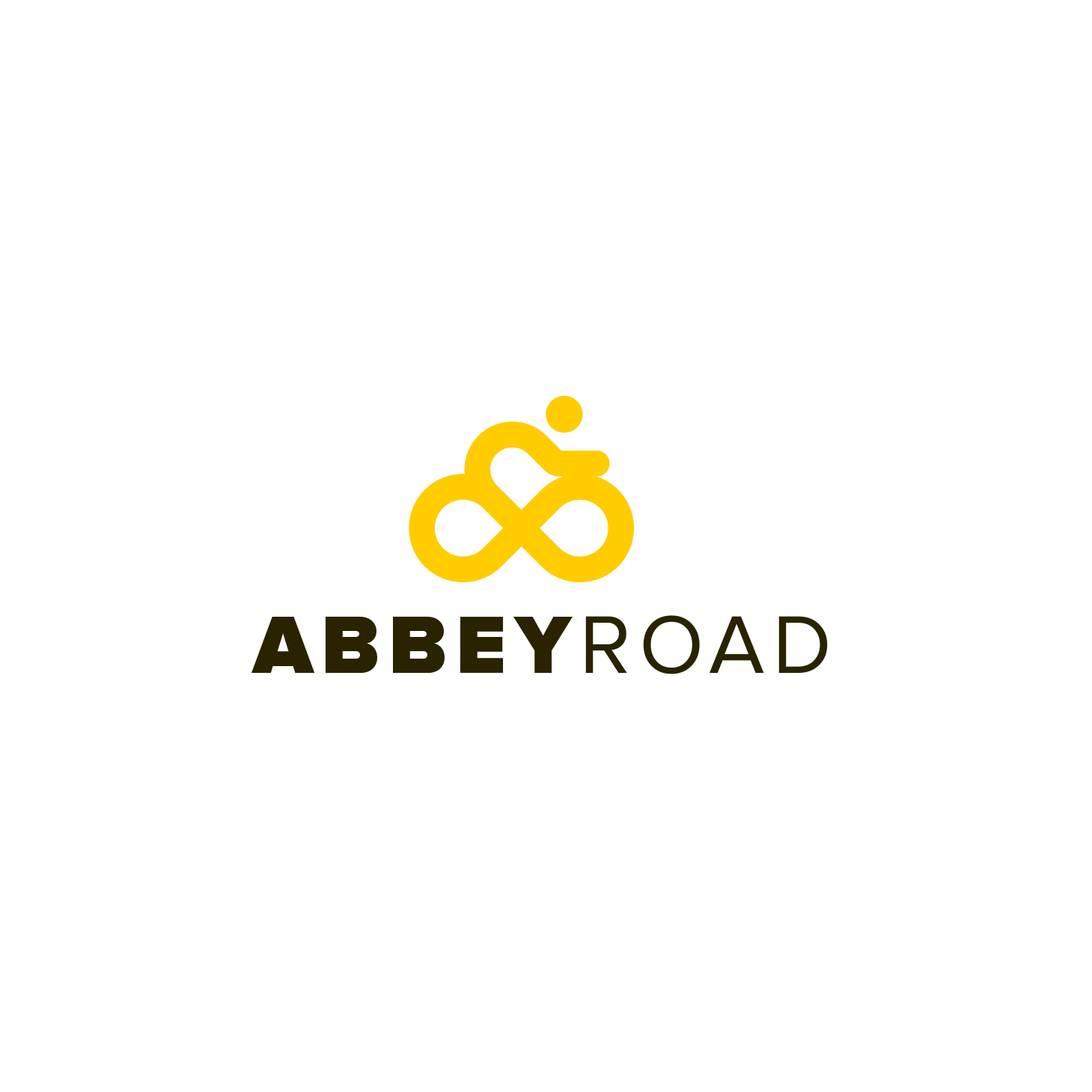
<style>
.page{position:relative;width:1092px;height:1092px;background:#ffffff}
.page>*{position:absolute;margin:0}
.t1{font:84.4px "ProximaNova-Black";letter-spacing:0.1em;color:#292300}
.t2{font:84.4px "ProximaNova-Regular";letter-spacing:0.1em;color:#292300}
</style>
<div class="page">
<p class="t1" style="left:251px;top:615px;width:577px;height:59px">ABBEY<span class="t2">ROAD</span></p>
</div>
